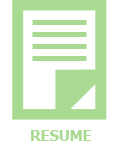
<style>
.page{position:relative;width:120px;height:150px;background:#ffffff}
.page>*{position:absolute;margin:0}
.t1{font:14.6px "Tahoma-Bold";color:#a9da92}
</style>
<div class="page">
<p class="t1" style="left:31px;top:130px;width:60px;height:11px">RESUME</p>
</div>
